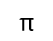
<style>
.page{position:relative;width:53px;height:41px;background:#ffffff}
.page>*{position:absolute;margin:0}
.t1{font:23.7px "DroidSans";color:#000000}
</style>
<div class="page">
<p class="t1" style="left:19px;top:18px;width:15px;height:13px">π</p>
</div>
